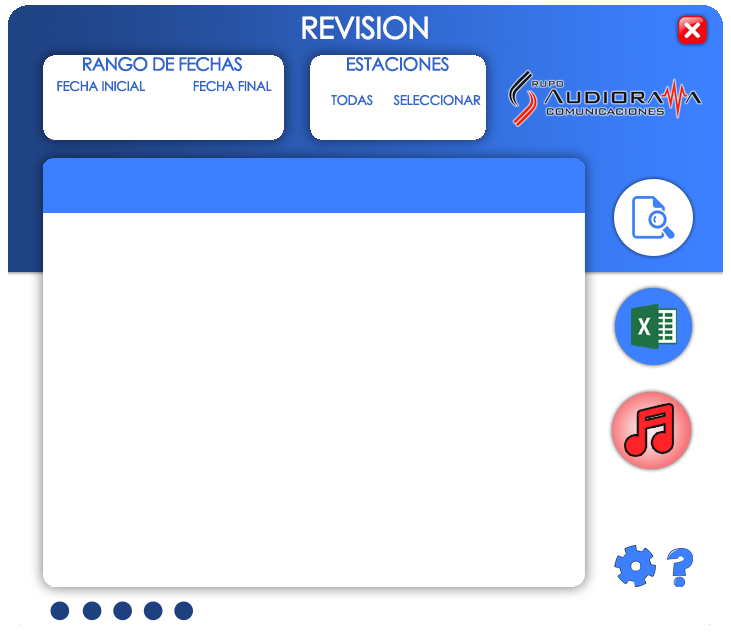
<style>
.page{position:relative;width:731px;height:632px;background:#ffffff}
.page>*{position:absolute;margin:0}
.t1{font:30px "CenturyGothic";letter-spacing:-0.04em;color:#fffefe;font-weight:bold}
.t2{font:18px "CenturyGothic";letter-spacing:-0.06em;color:#3066cc;font-weight:bold}
.t3{font:18px "CenturyGothic";letter-spacing:-0.04em;color:#3066cc;font-weight:bold}
.t4{font:13px "CenturyGothic";letter-spacing:-0.04em;color:#3066cc;font-weight:bold}
</style>
<div class="page">
<p class="t1" style="left:302px;top:15px;width:126px;height:25px">REVISION</p>
<p class="t2" style="left:83px;top:56px;width:159px;height:16px">RANGO DE FECHAS</p>
<p class="t3" style="left:347px;top:56px;width:102px;height:16px">ESTACIONES</p>
<p class="t4" style="left:57px;top:80px;width:215px;height:12px">FECHA INICIAL              FECHA FINAL</p>
<p class="t4" style="left:331px;top:94px;width:150px;height:12px">TODAS      SELECCIONAR</p>
</div>
